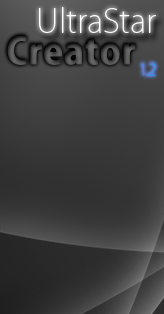
<style>
.page{position:relative;width:164px;height:314px}
.page>*{position:absolute;margin:0}
.t1{font:32.3px "KozGoPro-ExtraLight";color:#ffffff}
.t2{font:36.9px "KozGoPro-Heavy";color:#525252}
.t3{font:15.8px "KozGoPro-ExtraLight"}
</style>
<div class="page">
<p class="t1" style="left:39px;top:7px;width:117px;height:26px">UltraStar</p>
<p class="t2" style="left:7px;top:35px;width:129px;height:30px">Creator</p>
<p class="t3" style="left:141px;top:63px;width:15px;height:13px">1.2</p>
</div>
